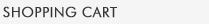
<style>
.page{position:relative;width:209px;height:24px;background:#f5f5f5}
.page>*{position:absolute;margin:0}
.t1{font:14px "FuturaBT-Light";letter-spacing:0.025em;color:#363636;text-transform:uppercase;font-weight:bold}
</style>
<div class="page">
<p class="t1" style="left:3px;top:6px;width:114px;height:12px">shopping cart</p>
</div>
